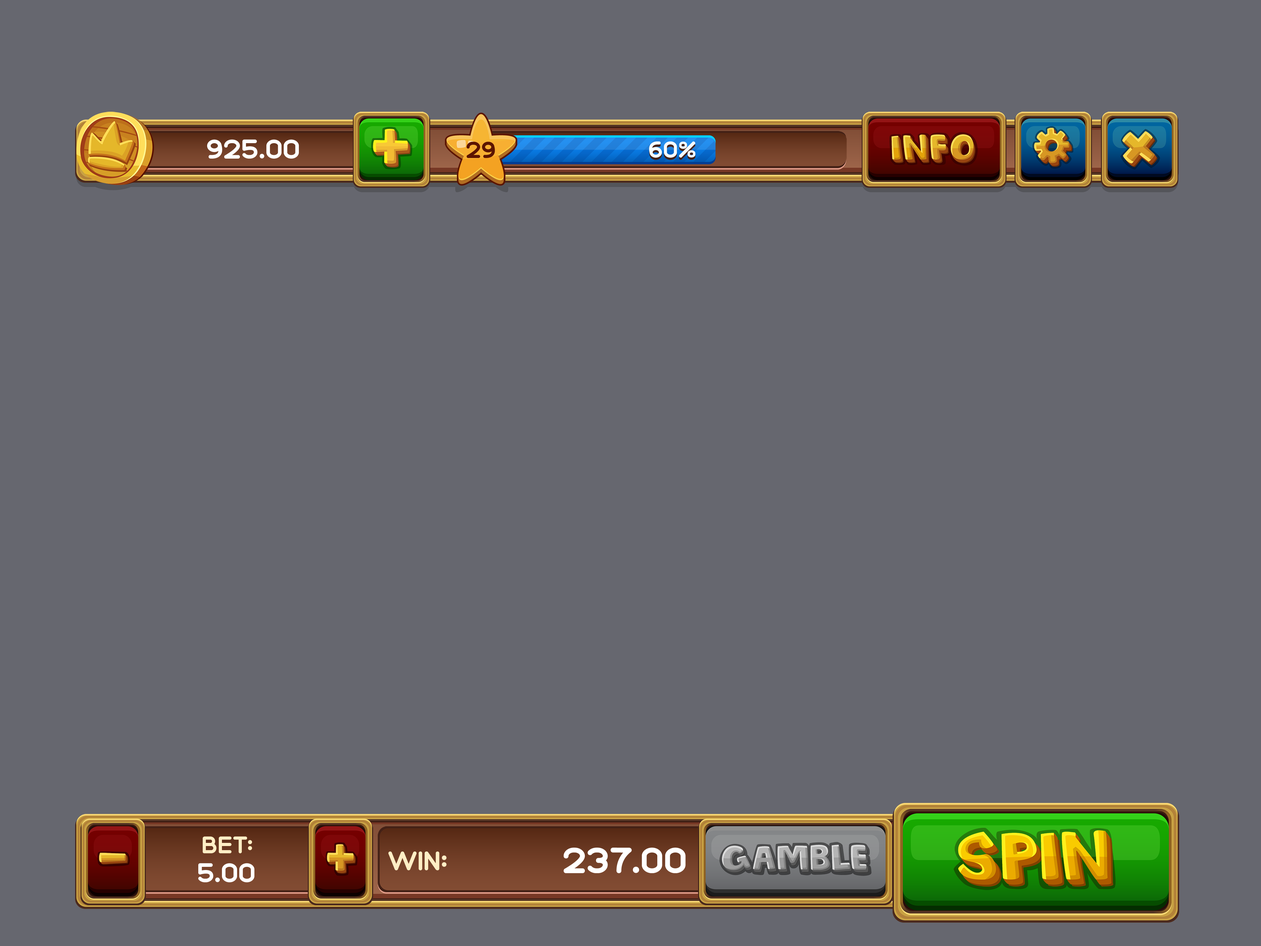
<style>
.page{position:relative;width:1261px;height:946px;background:#66676f}
.page>*{position:absolute;margin:0}
.t1{font:23.8px "SaranaiGame-Bold";color:#ffffff}
.t2{font:20.4px "SaranaiGame-Bold";color:#5b1401}
.t3{font:20.4px "SaranaiGame-Bold"}
.t4{font:20.4px "SaranaiGame-Bold";color:#f5fcff}
.t5{font:21px "SaranaiGame-Bold";color:#ffeec5}
.t6{font:23.6px "SaranaiGame-Bold";color:#ffeec5}
.t7{font:31.9px "SaranaiGame-Bold";color:#ffffff}
</style>
<div class="page">
<p class="t1" style="left:207px;top:139px;width:92px;height:20px">925.00</p>
<p class="t2" style="left:467px;top:142px;width:28px;height:16px">29</p>
<p class="t3" style="left:649px;top:143px;width:46px;height:17px">60%</p>
<p class="t4" style="left:649px;top:141px;width:46px;height:17px">60%</p>
<p class="t5" style="left:203px;top:836px;width:49px;height:17px">BET:</p>
<p class="t6" style="left:388px;top:851px;width:59px;height:19px">win:</p>
<p class="t7" style="left:564px;top:847px;width:122px;height:26px">237.00</p>
<p class="t1" style="left:198px;top:863px;width:56px;height:19px">5.00</p>
</div>
